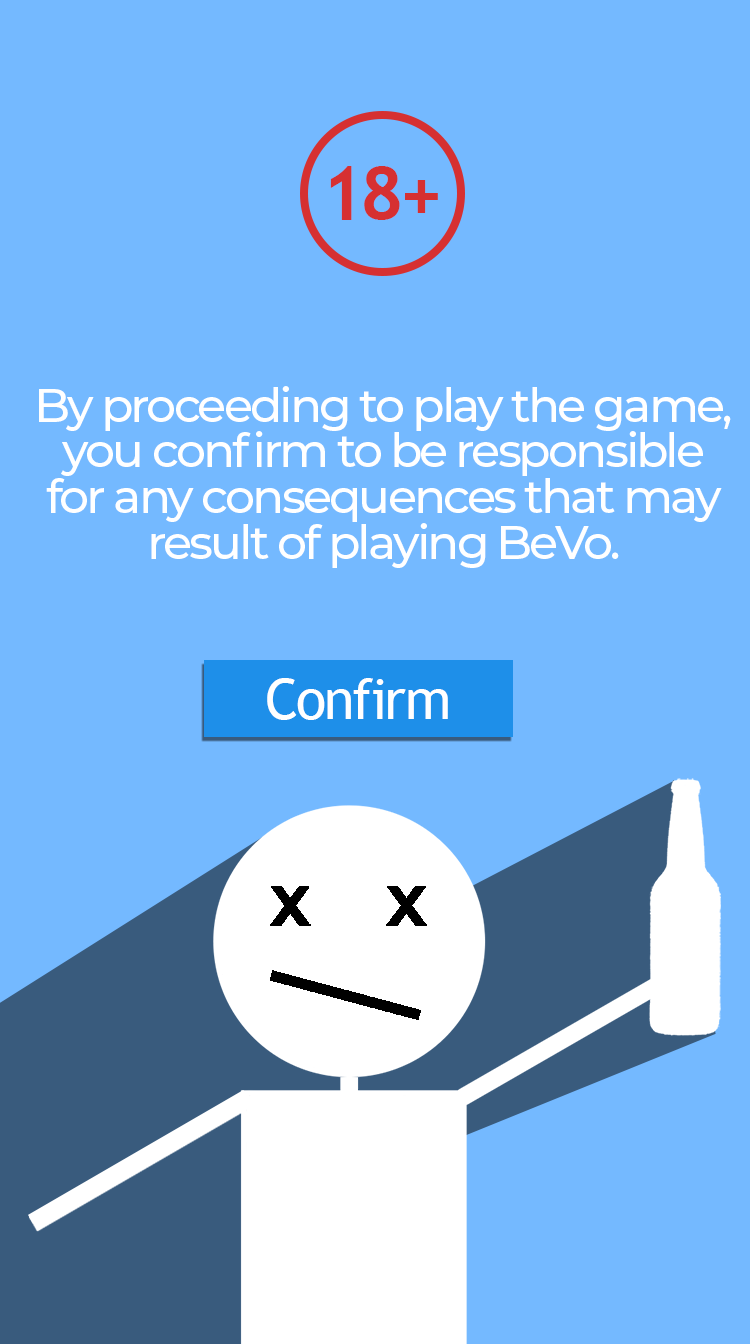
<style>
.page{position:relative;width:750px;height:1344px;background:#74b9ff}
.page>*{position:absolute;margin:0}
.t1{font:75px "TrebuchetMS-Bold";letter-spacing:-0.06em;color:#d63031}
.t2{font:47.4px/45.8px "Montserrat-Medium";letter-spacing:-0.06em;color:#ffffff}
.t3{font:56.3px "TrebuchetMS";letter-spacing:-0.04em;color:#ffffff}
.t4{font:56.3px "TrebuchetMS";letter-spacing:-0.06em;color:#ffffff}
.t5{font:56.3px "TrebuchetMS";letter-spacing:-0.02em;color:#ffffff}
</style>
<div class="page">
<p class="t1" style="left:330px;top:166px;width:108px;height:54px">18+</p>
<p class="t2" style="left:39px;top:386px;width:692px;height:182px;text-align:center">By proceeding to play the game,<br>you confirm to be responsible<br>for any consequences that may<br>result of playing BeVo.</p>
<p class="t3" style="left:267px;top:678px;width:181px;height:42px">Co<span class="t4">n</span><span class="t5">f</span><span class="t4">i</span><span class="t5">r</span>m</p>
</div>
